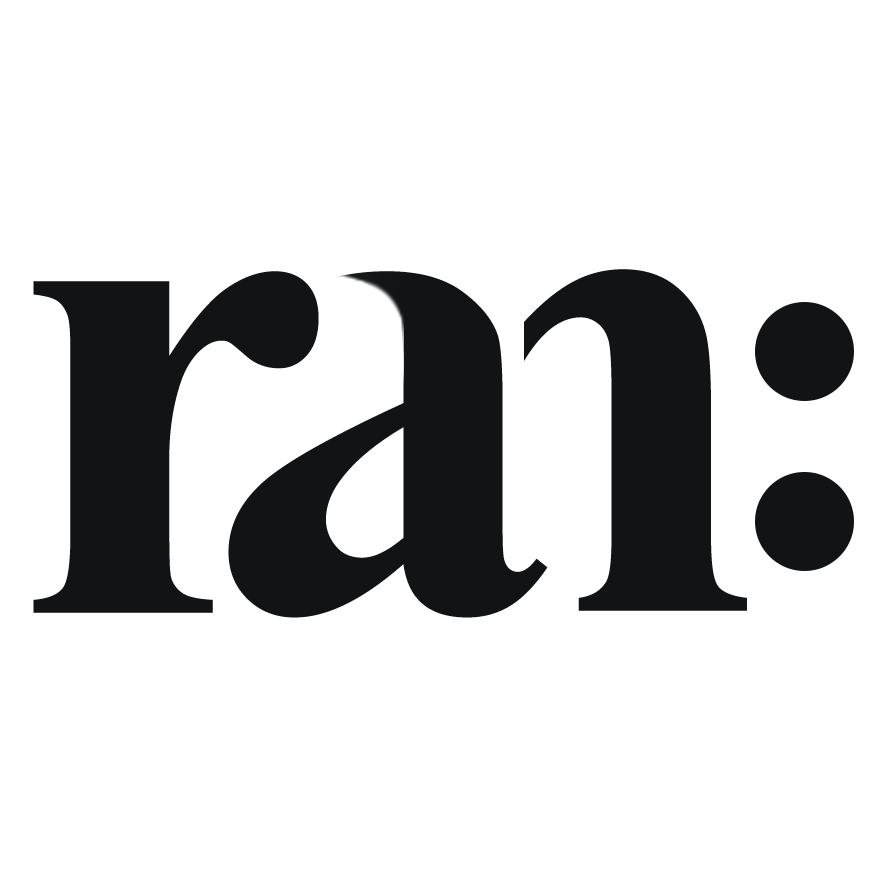
<style>
.page{position:relative;width:888px;height:888px;background:#ffffff}
.page>*{position:absolute;margin:0}
.t1{font:726px "TimesNewRomanPS-BoldMT";color:#000000}
</style>
<div class="page">
<p class="t1" style="left:388px;top:269px;width:359px;height:342px">n</p>
<p class="t1" style="left:33px;top:271px;width:286px;height:342px">r</p>
<p class="t1" style="left:228px;top:271px;width:320px;height:347px">a</p>
</div>
